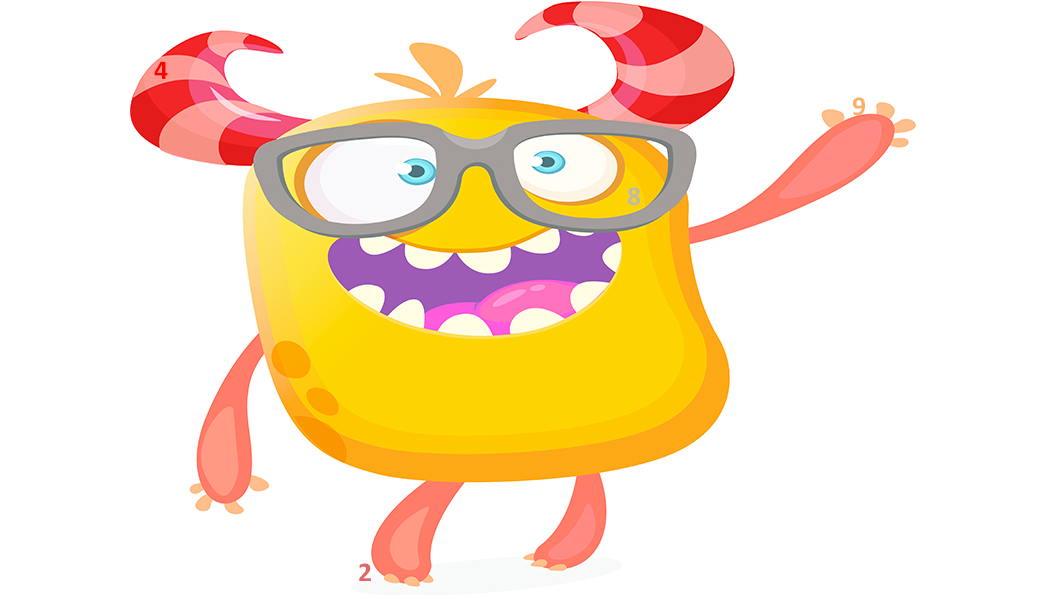
<style>
.page{position:relative;width:1041px;height:595px;background:#ffffff}
.page>*{position:absolute;margin:0}
.t1{font:27.2px "Calibri-Bold";letter-spacing:0.1em;color:#ff0000}
.t2{font:27.2px "Calibri-Bold";letter-spacing:0.1em;color:#f6b26b}
.t3{font:27.2px "Calibri-Bold";letter-spacing:0.1em;color:#bdbaa9}
.t4{font:27.2px "Calibri-Bold";letter-spacing:0.1em;color:#e06666}
</style>
<div class="page">
<p class="t1" style="left:154px;top:61px;width:14px;height:18px">4</p>
<p class="t2" style="left:853px;top:97px;width:12px;height:19px">9</p>
<p class="t3" style="left:627px;top:187px;width:14px;height:19px">8</p>
<p class="t4" style="left:359px;top:563px;width:12px;height:18px">2</p>
</div>
